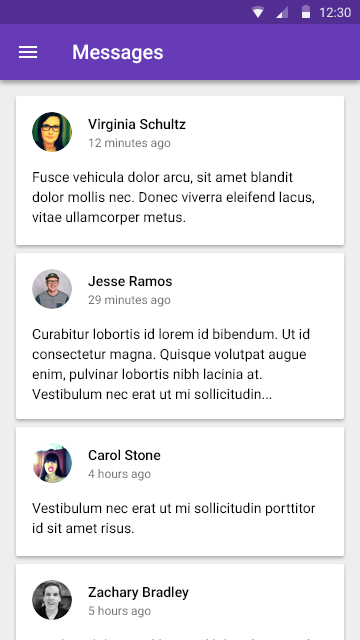
<style>
.page{position:relative;width:360px;height:640px;background:#ffffff}
.page>*{position:absolute;margin:0}
.t1{font:13px "Roboto-Regular";color:#e3e0ec}
.t2{font:20px "Roboto-Medium";letter-spacing:-0.005em;color:#ffffff}
.t3{font:14px "Roboto-Medium";color:#000000}
.t4{font:12px "Roboto-Regular";color:#737373}
.t5{font:14px/20px "Roboto-Regular";color:#000000}
</style>
<div class="page">
<p class="t1" style="left:320px;top:7px;width:31px;height:10px">12:30</p>
<p class="t2" style="left:73px;top:44px;width:90px;height:20px">Messages</p>
<p class="t3" style="left:88px;top:118px;width:98px;height:14px">Virginia Schultz</p>
<p class="t4" style="left:89px;top:138px;width:82px;height:12px">12 minutes ago</p>
<p class="t5" style="left:32px;top:171px;width:282px;height:54px">Fusce vehicula dolor arcu, sit amet blandit <br>dolor mollis nec. Donec viverra eleifend lacus, <br>vitae ullamcorper metus.</p>
<p class="t3" style="left:88px;top:276px;width:84px;height:11px">Jesse Ramos</p>
<p class="t4" style="left:88px;top:295px;width:83px;height:12px">29 minutes ago</p>
<p class="t5" style="left:32px;top:328px;width:278px;height:72px">Curabitur lobortis id lorem id bibendum. Ut id <br>consectetur magna. Quisque volutpat augue <br>enim, pulvinar lobortis nibh lacinia at. <br>Vestibulum nec erat ut mi sollicitudin...</p>
<p class="t3" style="left:88px;top:449px;width:73px;height:12px">Carol Stone</p>
<p class="t4" style="left:88px;top:469px;width:63px;height:12px">4 hours ago</p>
<p class="t5" style="left:32px;top:502px;width:284px;height:32px">Vestibulum nec erat ut mi sollicitudin porttitor <br>id sit amet risus.</p>
<p class="t3" style="left:88px;top:586px;width:101px;height:14px">Zachary Bradley</p>
<p class="t4" style="left:89px;top:606px;width:62px;height:12px">5 hours ago</p>
</div>
